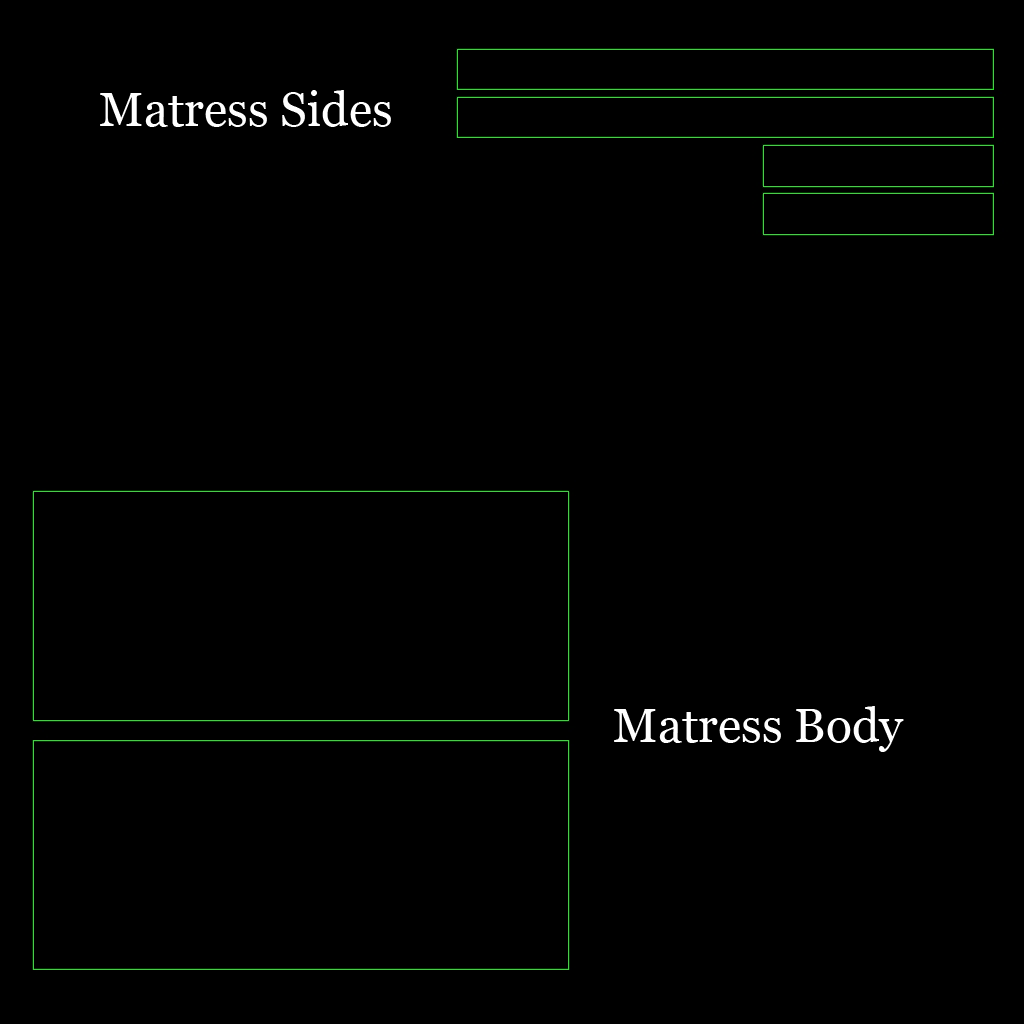
<style>
.page{position:relative;width:1024px;height:1024px;background:#000000}
.page>*{position:absolute;margin:0}
.t1{font:48px "Georgia";color:#ffffff}
</style>
<div class="page">
<p class="t1" style="left:100px;top:90px;width:291px;height:37px">Matress Sides</p>
<p class="t1" style="left:614px;top:706px;width:290px;height:46px">Matress Body</p>
</div>
